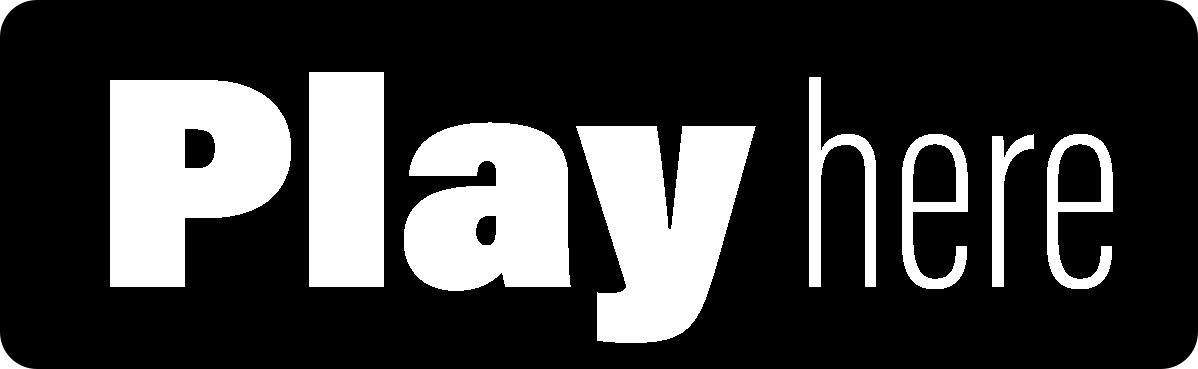
<style>
.page{position:relative;width:1198px;height:369px;background:#000000}
.page>*{position:absolute;margin:0}
.t1{font:301.4px "AcuminConcept-SemiCondensedUltraBlack";color:#ffffff}
.t2{font:301.4px "AcuminConcept-ExtraCondensedExtraLight";color:#ffffff}
</style>
<div class="page">
<p class="t1" style="left:110px;top:72px;width:1003px;height:271px">Play <span class="t2">here</span></p>
</div>
